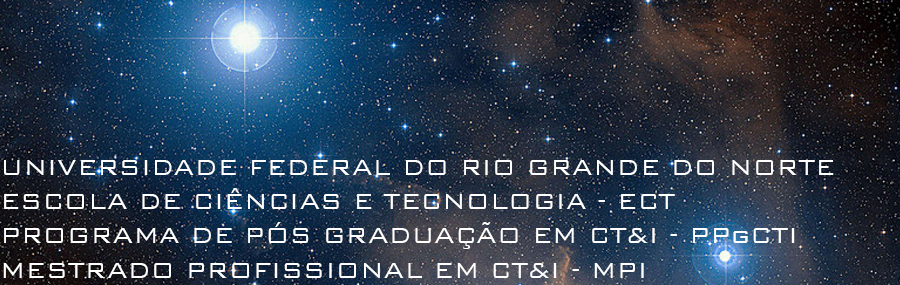
<style>
.page{position:relative;width:900px;height:285px}
.page>*{position:absolute;margin:0}
.t1{font:28.5px "BankGothicBT-Light";color:#ffffff}
</style>
<div class="page">
<p class="t1" style="left:3px;top:160px;width:831px;height:118px">UNIVERSIDADE FEDERAL DO RIO GRANDE DO NORTE<br>ESCOLA DE CIÊNCIAS E TECNOLOGIA - ECT<br>PROGRAMA DE PÓS GRADUAÇÃO EM CT&amp;I - PPgCTI<br>MESTRADO PROFISSIONAL EM CT&amp;I - MPI</p>
</div>
